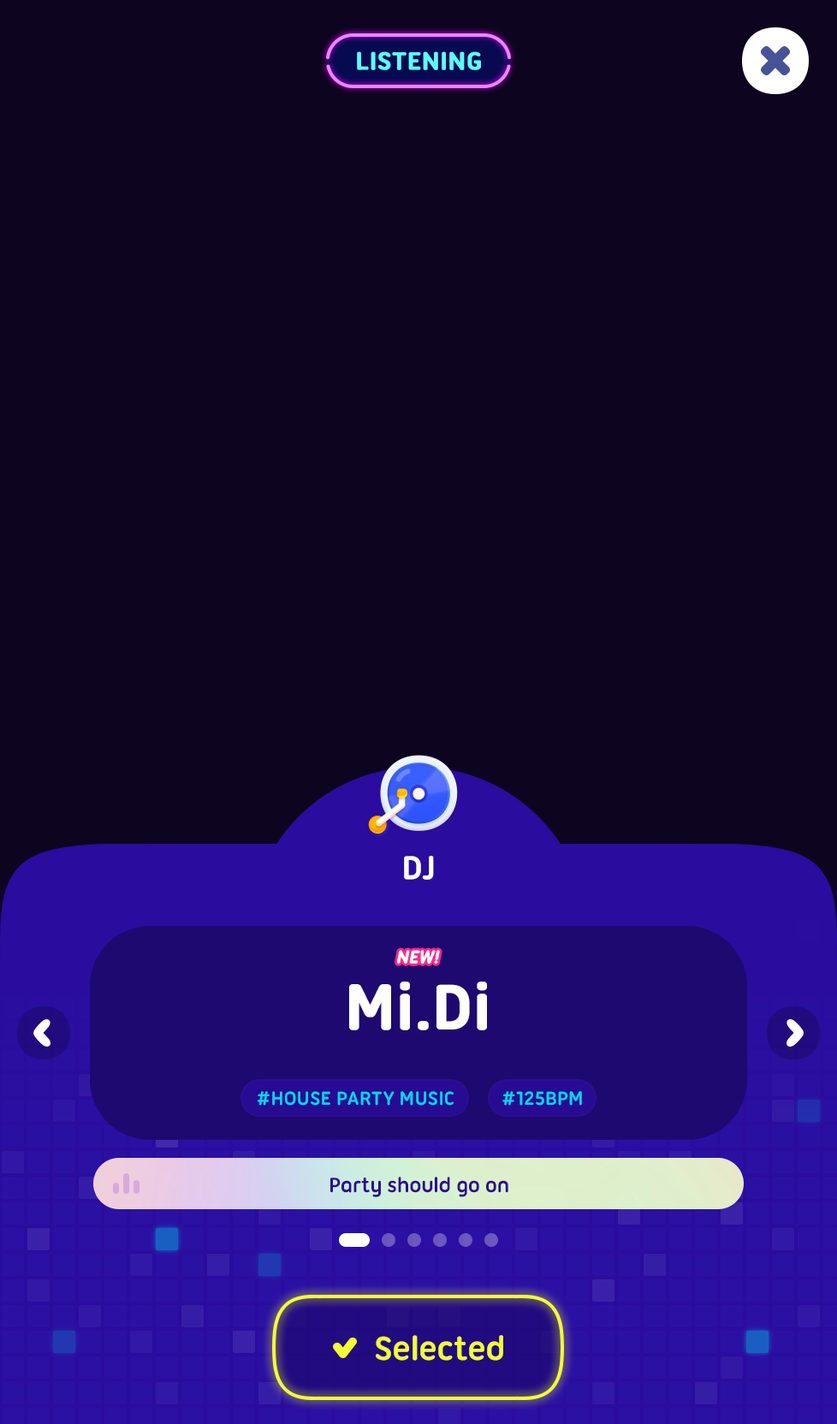
<style>
.page{position:relative;width:837px;height:1424px;background:#0d0420}
.page>*{position:absolute;margin:0}
.t1{font:26.8px "UbuntuTitling-Bold";color:#5afdff;text-transform:uppercase;font-weight:bold}
.t2{font:36px "UbuntuTitling-Bold";letter-spacing:-0.025em;color:#ffffff;text-transform:uppercase}
.t3{font:18.8px "UbuntuTitling-Bold";letter-spacing:-0.03em;color:#ffffff;text-transform:uppercase;font-weight:bold;font-style:italic}
.t4{font:68.5px "UbuntuTitling-Bold";color:#ffffff;font-weight:bold}
.t5{font:20.5px "UbuntuTitling-Bold";color:#03d6ef;text-transform:uppercase}
.t6{font:22.3px "UbuntuTitling-Bold";letter-spacing:-0.025em;color:#2e0e8a}
.t7{font:36px "UbuntuTitling-Bold";letter-spacing:-0.025em;color:#f1fd35}
</style>
<div class="page">
<p class="t1" style="left:357px;top:51px;width:124px;height:19px">Listening</p>
<p class="t2" style="left:404px;top:856px;width:30px;height:24px">DJ</p>
<p class="t3" style="left:397px;top:950px;width:43px;height:14px">New!</p>
<p class="t4" style="left:349px;top:982px;width:138px;height:49px">Mi.Di</p>
<p class="t5" style="left:257px;top:1091px;width:325px;height:15px">#House party music         #125bpm</p>
<p class="t6" style="left:330px;top:1177px;width:178px;height:21px">Party should go on</p>
<p class="t7" style="left:376px;top:1335px;width:127px;height:26px">Selected</p>
</div>
